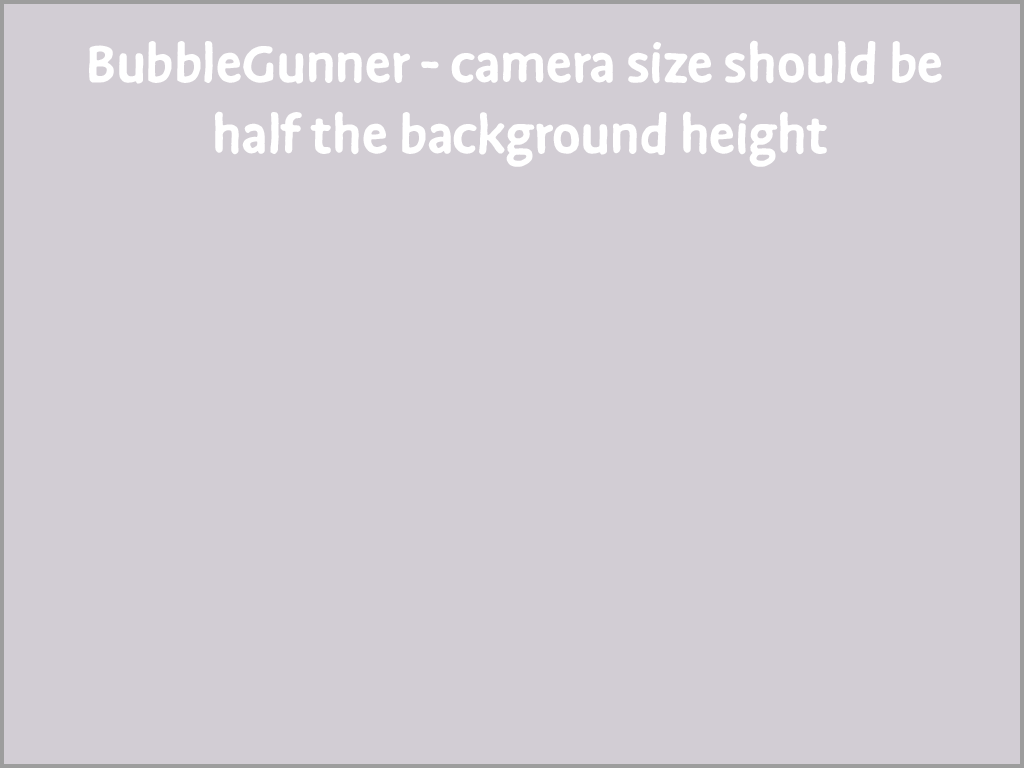
<style>
.page{position:relative;width:1024px;height:768px;background:#d2cdd4}
.page>*{position:absolute;margin:0}
.t1{font:59.1px "DuperPro-Bold";color:#ffffff}
</style>
<div class="page">
<p class="t1" style="left:89px;top:40px;width:853px;height:127px;text-align:center">BubbleGunner - camera size should be <br>half the background height</p>
</div>
